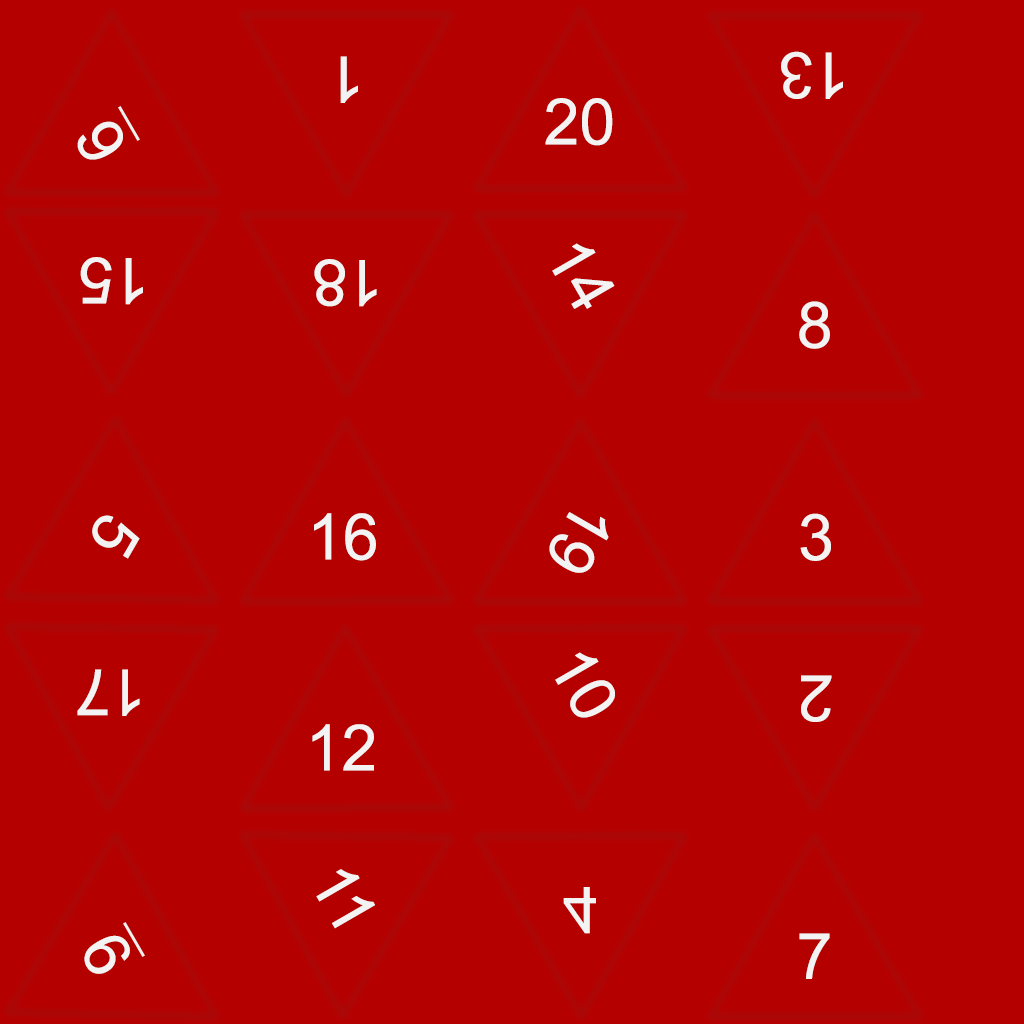
<style>
.page{position:relative;width:1024px;height:1024px;background:#b50000}
.page>*{position:absolute;margin:0}
.t1{font:64.3px "ArialMT";color:#f3f3f3}
</style>
<div class="page">
<p class="t1" style="left:781px;top:51px;width:62px;height:48px;rotate:180deg">13</p>
<p class="t1" style="left:340px;top:56px;width:18px;height:47px;rotate:180deg">1</p>
<p class="t1" style="left:545px;top:98px;width:68px;height:48px">20</p>
<p class="t1" style="left:77px;top:121px;width:46px;height:39px;rotate:-120deg">6</p>
<p class="t1" style="left:552px;top:243px;width:63px;height:66px;rotate:60deg">14</p>
<p class="t1" style="left:80px;top:257px;width:63px;height:48px;rotate:180deg">15</p>
<p class="t1" style="left:314px;top:259px;width:63px;height:48px;rotate:180deg">18</p>
<p class="t1" style="left:799px;top:301px;width:31px;height:48px;rotate:180deg">8</p>
<p class="t1" style="left:92px;top:515px;width:48px;height:44px;rotate:120deg">5</p>
<p class="t1" style="left:314px;top:513px;width:62px;height:48px">16</p>
<p class="t1" style="left:549px;top:512px;width:60px;height:61px;rotate:120deg">19</p>
<p class="t1" style="left:800px;top:513px;width:31px;height:48px">3</p>
<p class="t1" style="left:555px;top:652px;width:60px;height:66px;rotate:60deg">10</p>
<p class="t1" style="left:77px;top:669px;width:63px;height:47px;rotate:180deg">17</p>
<p class="t1" style="left:801px;top:675px;width:31px;height:47px;rotate:180deg">2</p>
<p class="t1" style="left:312px;top:724px;width:62px;height:47px">12</p>
<p class="t1" style="left:316px;top:869px;width:59px;height:60px;rotate:60deg">11</p>
<p class="t1" style="left:563px;top:887px;width:33px;height:47px">4</p>
<p class="t1" style="left:84px;top:935px;width:46px;height:39px;rotate:-120deg">9</p>
<p class="t1" style="left:799px;top:933px;width:31px;height:46px">7</p>
</div>
